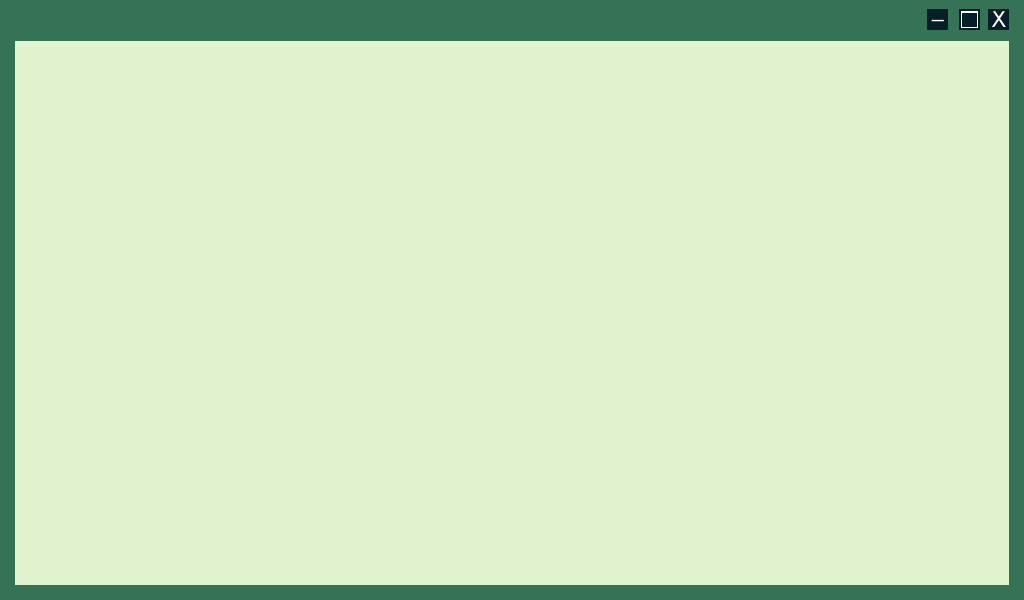
<style>
.page{position:relative;width:1024px;height:600px;background:#e0f2ce}
.page>*{position:absolute;margin:0}
.t1{font:21.9px "ArialMT";color:#ffffff;scale:0.95 1}
</style>
<div class="page">
<p class="t1" style="left:992px;top:11px;width:14px;height:16px">X</p>
</div>
